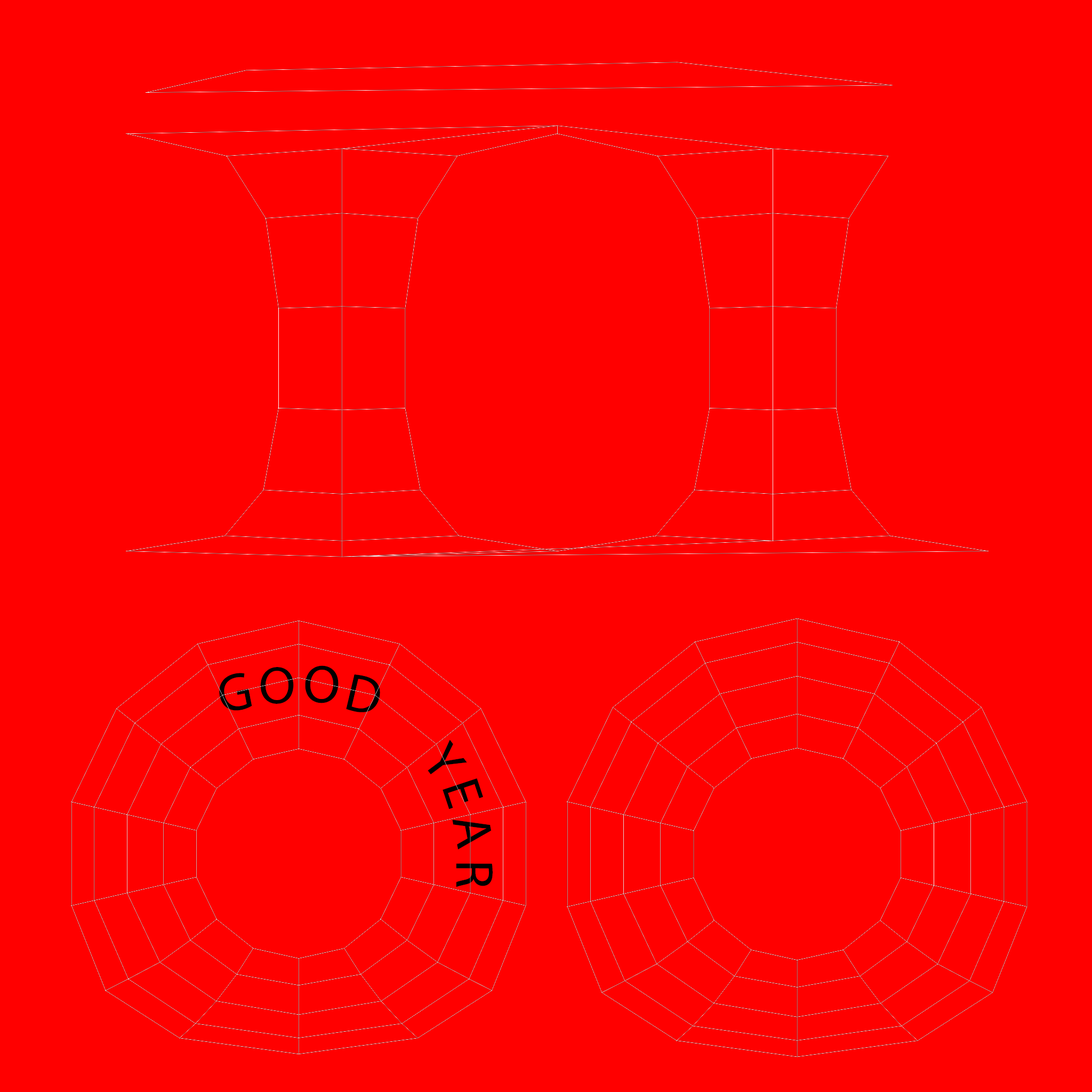
<style>
.page{position:relative;width:1092px;height:1092px;background:#ff0000}
.page>*{position:absolute;margin:0}
.t1{font:53.3px "MyriadPro-Regular";color:#000000}
</style>
<div class="page">
<p class="t1" style="left:305px;top:665px;width:34px;height:38px;rotate:4deg">O</p>
<p class="t1" style="left:219px;top:673px;width:33px;height:38px;rotate:-11deg">G</p>
<p class="t1" style="left:260px;top:667px;width:34px;height:37px">O</p>
<p class="t1" style="left:346px;top:674px;width:34px;height:38px;rotate:13deg">D</p>
<p class="t1" style="left:428px;top:740px;width:39px;height:35px;rotate:53deg">Y</p>
<p class="t1" style="left:443px;top:778px;width:40px;height:31px;rotate:72deg">E</p>
<p class="t1" style="left:452px;top:820px;width:39px;height:29px;rotate:79deg">A</p>
<p class="t1" style="left:456px;top:863px;width:37px;height:24px;rotate:90deg">R</p>
</div>
